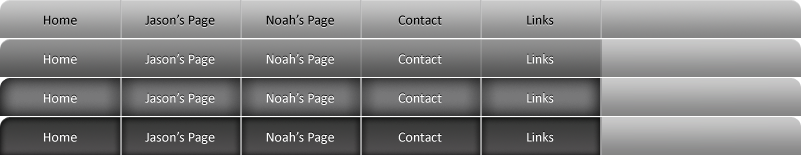
<style>
.page{position:relative;width:801px;height:155px}
.page>*{position:absolute;margin:0}
.t1{font:14px "Calibri";color:#000000}
.t2{font:14px "Calibri";color:#ffffff}
</style>
<div class="page">
<p class="t1" style="left:44px;top:15px;width:33px;height:10px">Home</p>
<p class="t1" style="left:145px;top:14px;width:70px;height:13px">Jason’s Page</p>
<p class="t1" style="left:266px;top:14px;width:68px;height:13px">Noah’s Page</p>
<p class="t1" style="left:398px;top:15px;width:44px;height:10px">Contact</p>
<p class="t1" style="left:527px;top:15px;width:27px;height:10px">Links</p>
<p class="t2" style="left:44px;top:54px;width:33px;height:10px">Home</p>
<p class="t2" style="left:145px;top:53px;width:70px;height:13px">Jason’s Page</p>
<p class="t2" style="left:266px;top:53px;width:68px;height:13px">Noah’s Page</p>
<p class="t2" style="left:398px;top:54px;width:44px;height:10px">Contact</p>
<p class="t2" style="left:527px;top:54px;width:27px;height:10px">Links</p>
<p class="t2" style="left:44px;top:93px;width:33px;height:10px">Home</p>
<p class="t2" style="left:145px;top:92px;width:70px;height:13px">Jason’s Page</p>
<p class="t2" style="left:266px;top:92px;width:68px;height:13px">Noah’s Page</p>
<p class="t2" style="left:398px;top:93px;width:44px;height:10px">Contact</p>
<p class="t2" style="left:527px;top:93px;width:27px;height:10px">Links</p>
<p class="t2" style="left:44px;top:132px;width:33px;height:10px">Home</p>
<p class="t2" style="left:145px;top:131px;width:70px;height:13px">Jason’s Page</p>
<p class="t2" style="left:266px;top:131px;width:68px;height:13px">Noah’s Page</p>
<p class="t2" style="left:398px;top:132px;width:44px;height:10px">Contact</p>
<p class="t2" style="left:527px;top:132px;width:27px;height:10px">Links</p>
</div>
